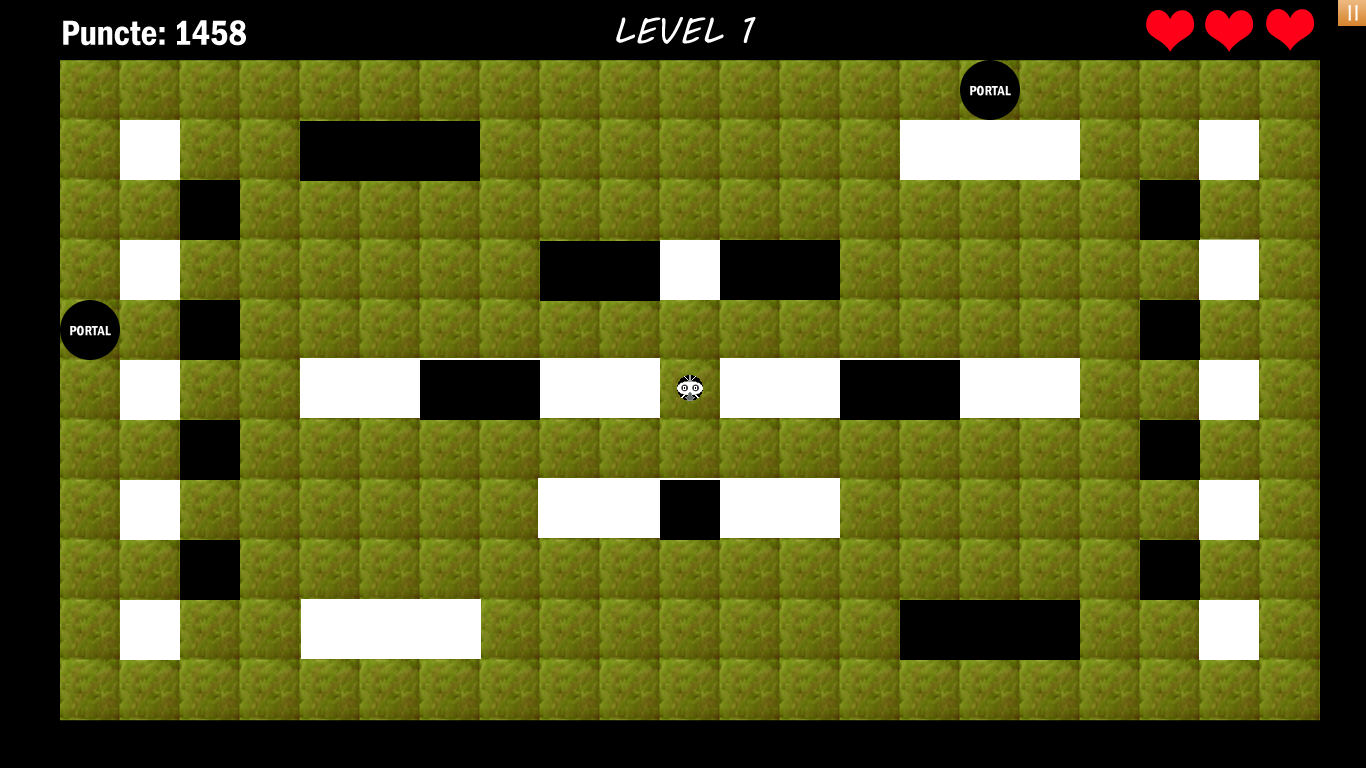
<style>
.page{position:relative;width:1366px;height:768px;background:#000000}
.page>*{position:absolute;margin:0}
.t1{font:24px "Candara";color:#ffffff}
.t2{font:36px "MVBoli";color:#ffffff}
.t3{font:36px "FranklinGothic-DemiCond";color:#ffffff}
.t4{font:14px "FranklinGothic-DemiCond";color:#ffffff}
</style>
<div class="page">
<p class="t1" style="left:1348px;top:5px;width:10px;height:16px">II</p>
<p class="t2" style="left:616px;top:17px;width:140px;height:27px">LEVEL 1</p>
<p class="t3" style="left:63px;top:20px;width:183px;height:26px">Puncte: 1458</p>
<p class="t4" style="left:970px;top:85px;width:41px;height:11px">PORTAL</p>
<p class="t4" style="left:70px;top:325px;width:41px;height:11px">PORTAL</p>
</div>
